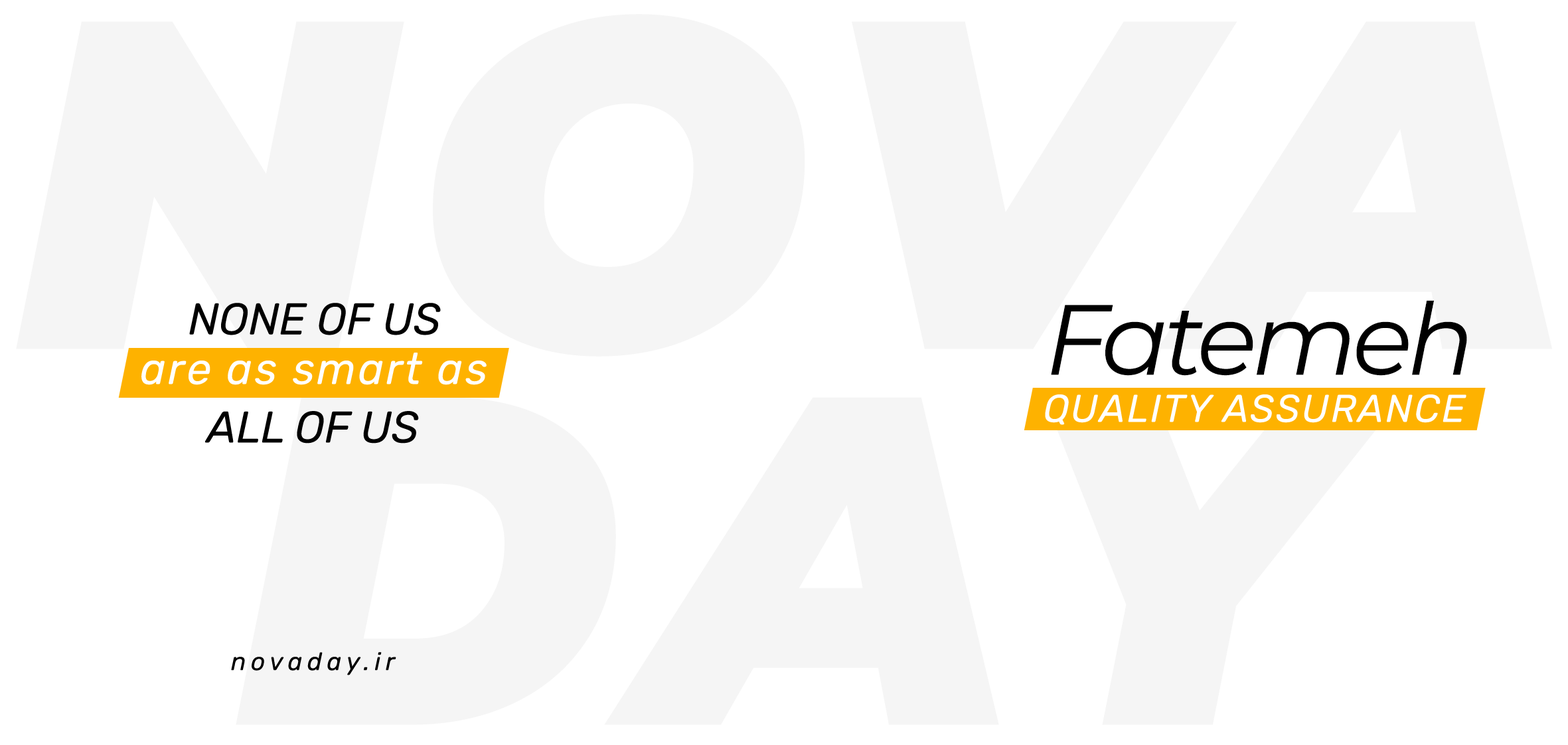
<style>
.page{position:relative;width:1568px;height:745px;background:#ffffff}
.page>*{position:absolute;margin:0}
.t1{font:44.3px "Rubik-Italic";color:#000000}
.t2{font:99.6px "Montserrat-Italic";letter-spacing:-0.05em;color:#000000}
.t3{font:44.3px "Rubik-Italic";letter-spacing:0.05em;color:#ffffff}
.t4{font:38.7px "Rubik-Italic";letter-spacing:0.05em;color:#ffffff}
.t5{font:24.9px "Rubik-Italic";letter-spacing:0.2em;color:#000000}
</style>
<div class="page">
<p class="t1" style="left:189px;top:303px;width:252px;height:32px">NONE OF US</p>
<p class="t2" style="left:1051px;top:300px;width:416px;height:76px">Fatemeh</p>
<p class="t3" style="left:141px;top:353px;width:346px;height:32px">are as smart as</p>
<p class="t4" style="left:1045px;top:394px;width:421px;height:31px">QUALITY ASSURANCE</p>
<p class="t1" style="left:205px;top:411px;width:214px;height:32px">ALL OF US</p>
<p class="t5" style="left:231px;top:652px;width:165px;height:23px">novaday.ir</p>
</div>
